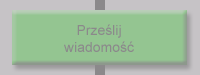
<style>
.page{position:relative;width:200px;height:75px;background:#94c591}
.page>*{position:absolute;margin:0}
.t1{font:14px "ArialMT";color:#8b898b}
</style>
<div class="page">
<p class="t1" style="left:64px;top:24px;width:70px;height:28px;text-align:center">Prześlij<br>wiadomość</p>
</div>
